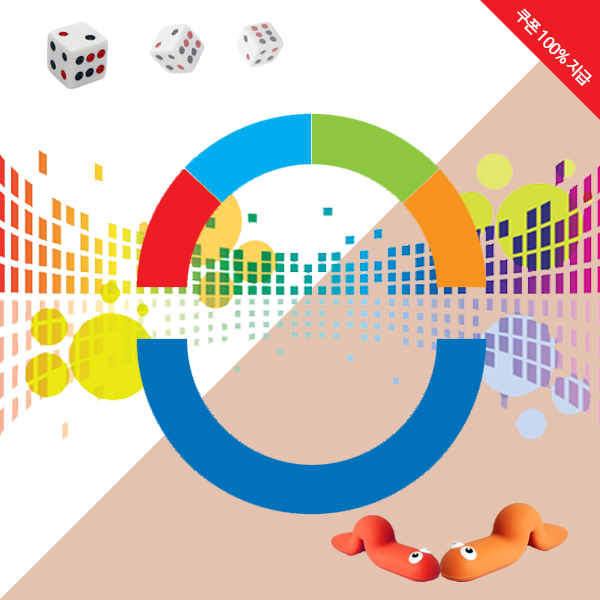
<style>
.page{position:relative;width:600px;height:600px;background:#ffffff}
.page>*{position:absolute;margin:0}
.t1{font:15.5px "NanumBarunGothic";letter-spacing:-0.05em;color:#ffffff;font-weight:bold}
</style>
<div class="page">
<p class="t1" style="left:517px;top:8px;width:75px;height:78px;rotate:45deg">쿠폰 100% 지급</p>
</div>
